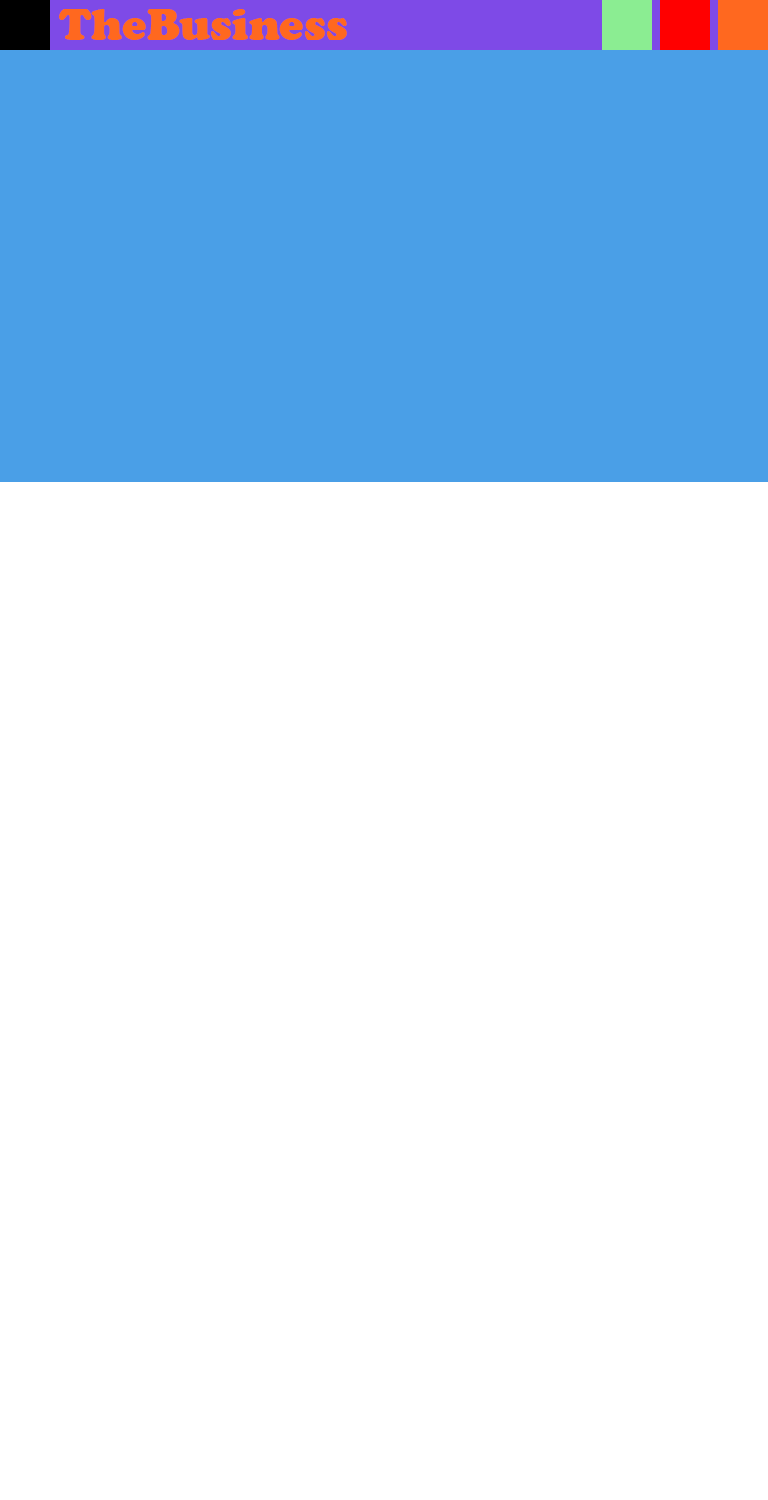
<style>
.page{position:relative;width:768px;height:1500px;background:#ffffff}
.page>*{position:absolute;margin:0}
.t1{font:45.8px "CooperBlack";color:#ff681f}
</style>
<div class="page">
<p class="t1" style="left:59px;top:9px;width:288px;height:31px">TheBusiness</p>
</div>
